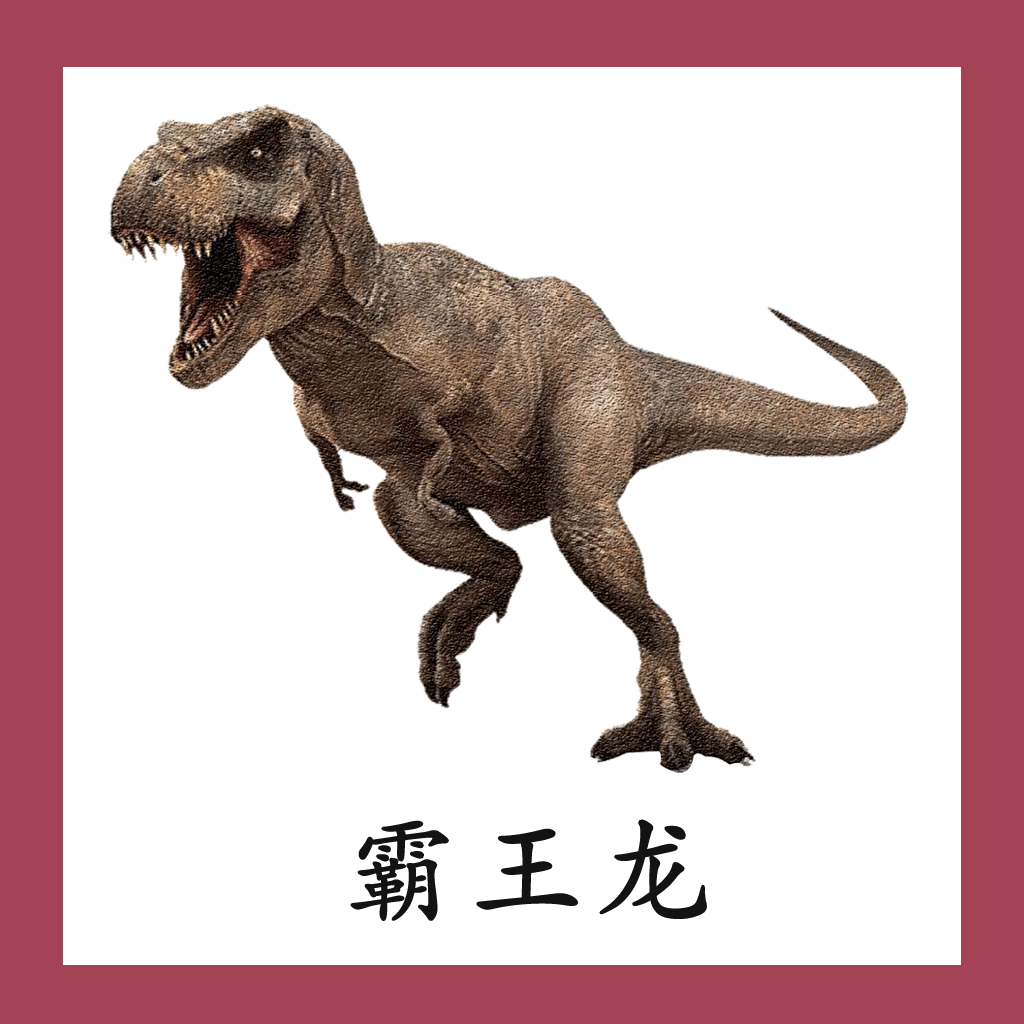
<style>
.page{position:relative;width:1024px;height:1024px;background:#ffffff}
.page>*{position:absolute;margin:0}
.t1{font:120.7px "STKaiti";color:#131313;font-weight:bold}
</style>
<div class="page">
<p class="t1" style="left:350px;top:819px;width:357px;height:102px">霸王龙</p>
</div>
